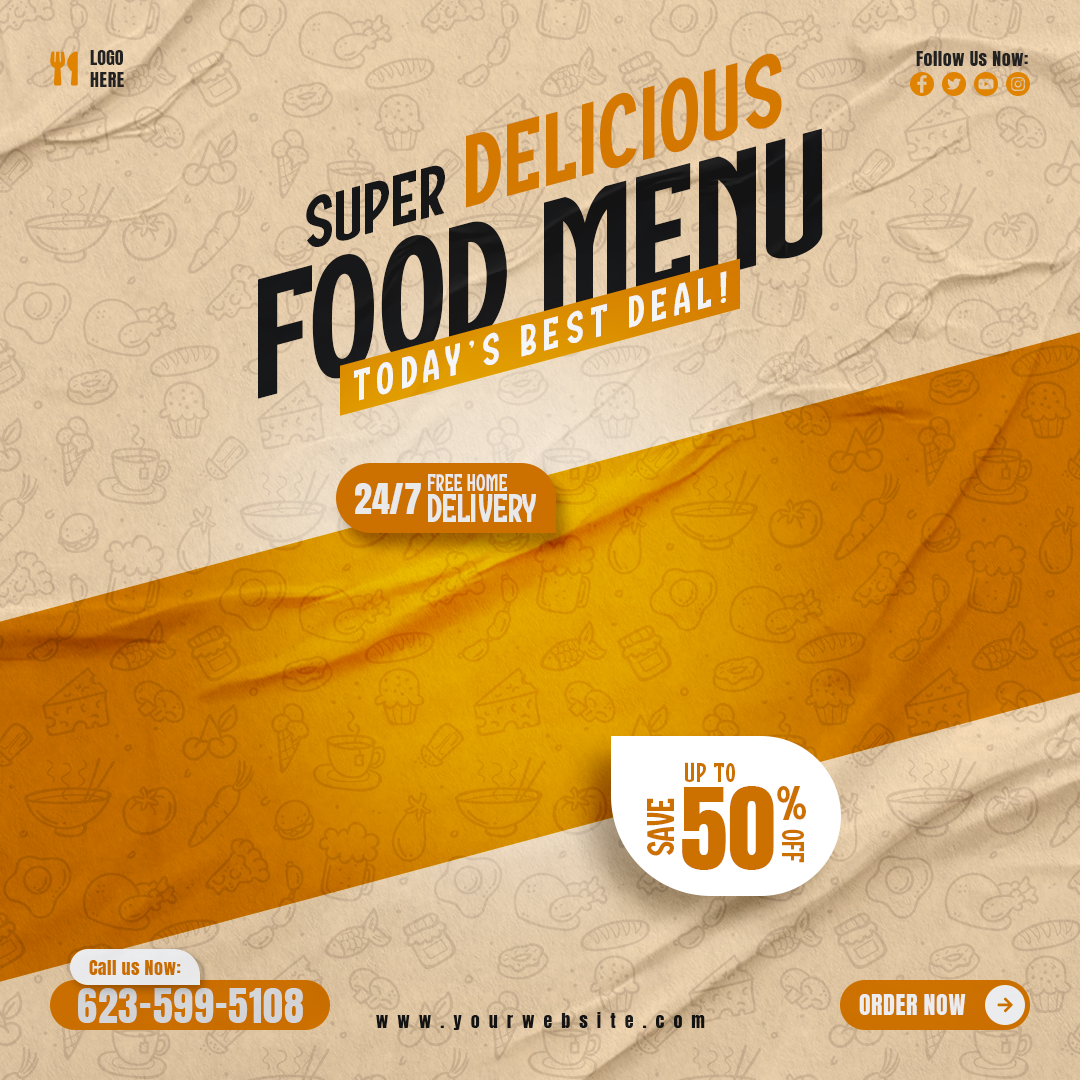
<style>
.page{position:relative;width:1080px;height:1080px}
.page>*{position:absolute;margin:0}
.t1{font:18px "Anton-Regular";color:#222222;text-transform:uppercase}
.t2{font:18px "Anton-Regular";letter-spacing:0.035em;color:#222222;text-transform:uppercase}
.t3{font:102px "Bandikotrial-Regular";letter-spacing:0.015em;color:#df8300;text-transform:uppercase;scale:1.03 1}
.t4{font:18px "Anton-Regular";letter-spacing:0.025em;color:#222222}
.t5{font:170px "Bandikotrial-Regular";color:#222222;text-transform:uppercase;scale:1.03 1}
.t6{font:72px "Bandikotrial-Regular";letter-spacing:0.015em;color:#222222;text-transform:uppercase;scale:1.03 1}
.t7{font:44px "Bandikotrial-Regular";letter-spacing:0.15em;color:#ffffff;text-transform:uppercase;scale:1.03 1}
.t8{font:36px "Anton-Regular";color:#e9e9ea;text-transform:uppercase}
.t9{font:24px "Bandikotrial-Regular";color:#e9e9ea;text-transform:uppercase}
.t10{font:40px "Bandikotrial-Regular";color:#e9e9ea;text-transform:uppercase}
.t11{font:27.2px "Bandikotrial-Regular";letter-spacing:0.05em;color:#cc7000;text-transform:uppercase}
.t12{font:38.4px "Bandikotrial-Regular";color:#cc7000;text-transform:uppercase}
.t13{font:96px "Anton-Regular";color:#cc7000;text-transform:uppercase}
.t14{font:48px "Bandikotrial-Regular";color:#cc7000;text-transform:uppercase}
.t15{font:30.4px "Bandikotrial-Regular";color:#cc7000;text-transform:uppercase}
.t16{font:18px "Anton-Regular";letter-spacing:0.025em;color:#df8300}
.t17{font:40px "Anton-Regular";letter-spacing:0.025em;color:#e9e9ea;text-transform:uppercase}
.t18{font:24px "Anton-Regular";letter-spacing:0.015em;color:#ffffff;text-transform:uppercase}
.t19{font:18px "Anton-Regular";letter-spacing:0.5em;color:#222222}
</style>
<div class="page">
<p class="t1" style="left:90px;top:50px;width:34px;height:37px">Logo<br><span class="t2">Here</span></p>
<p class="t3" style="left:466px;top:53px;width:316px;height:155px;rotate:-15deg">Delicious</p>
<p class="t4" style="left:916px;top:51px;width:112px;height:15px">Follow Us Now:</p>
<p class="t5" style="left:258px;top:128px;width:565px;height:271px;rotate:-15deg">Food Menu</p>
<p class="t6" style="left:306px;top:165px;width:139px;height:82px;rotate:-15deg">Super</p>
<p class="t7" style="left:354px;top:271px;width:373px;height:130px;rotate:-15deg">Today’s Best Deal!</p>
<p class="t8" style="left:355px;top:483px;width:66px;height:31px">24/7</p>
<p class="t9" style="left:428px;top:474px;width:79px;height:17px">Free Home</p>
<p class="t10" style="left:428px;top:494px;width:108px;height:28px">Delivery</p>
<p class="t11" style="left:685px;top:762px;width:50px;height:20px">Up to</p>
<p class="t12" style="left:647px;top:798px;width:27px;height:58px;rotate:-90deg">Save</p>
<p class="t13" style="left:682px;top:786px;width:92px;height:84px">50</p>
<p class="t14" style="left:777px;top:786px;width:29px;height:34px">%</p>
<p class="t15" style="left:782px;top:829px;width:22px;height:34px;rotate:90deg">Off</p>
<p class="t16" style="left:89px;top:960px;width:92px;height:15px">Call us Now:</p>
<p class="t17" style="left:78px;top:988px;width:225px;height:35px">623-599-5108</p>
<p class="t18" style="left:859px;top:994px;width:107px;height:21px">Order Now</p>
<p class="t19" style="left:376px;top:1012px;width:329px;height:18px">www.yourwebsite.com</p>
</div>
